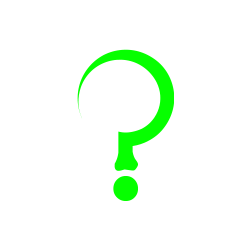
<style>
.page{position:relative;width:250px;height:250px;background:#ffffff}
.page>*{position:absolute;margin:0}
.t1{font:200px "DemonsandDarlings";color:#06ff00}
</style>
<div class="page">
<p class="t1" style="left:77px;top:49px;width:97px;height:152px">?</p>
</div>
